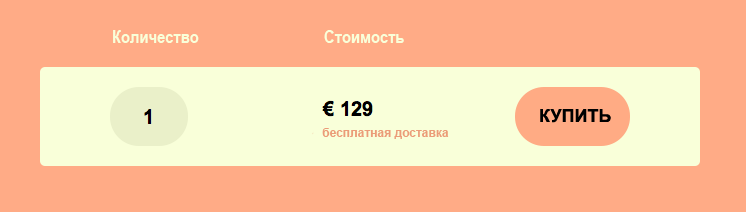
<style>
.page{position:relative;width:746px;height:212px;background:#ffab86}
.page>*{position:absolute;margin:0}
.t1{font:18px "ArialNarrow-Bold";color:#f9ffd9}
.t2{font:18px "Arial-BoldMT";color:#000000}
.t3{font:12px "Arial-BoldMT";color:#eb9c78}
</style>
<div class="page">
<p class="t1" style="left:113px;top:30px;width:86px;height:13px">Количество</p>
<p class="t1" style="left:324px;top:30px;width:80px;height:13px">Стоимость</p>
<p class="t2" style="left:540px;top:109px;width:71px;height:14px">КУПИТЬ</p>
<p class="t3" style="left:322px;top:128px;width:127px;height:11px">бесплатная доставка</p>
</div>
